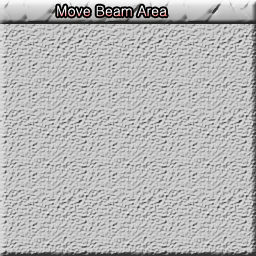
<style>
.page{position:relative;width:256px;height:256px}
.page>*{position:absolute;margin:0}
.t1{font:14px "Gulim"}
</style>
<div class="page">
<p class="t1" style="left:57px;top:5px;width:110px;height:12px">Move Beam Area</p>
</div>
